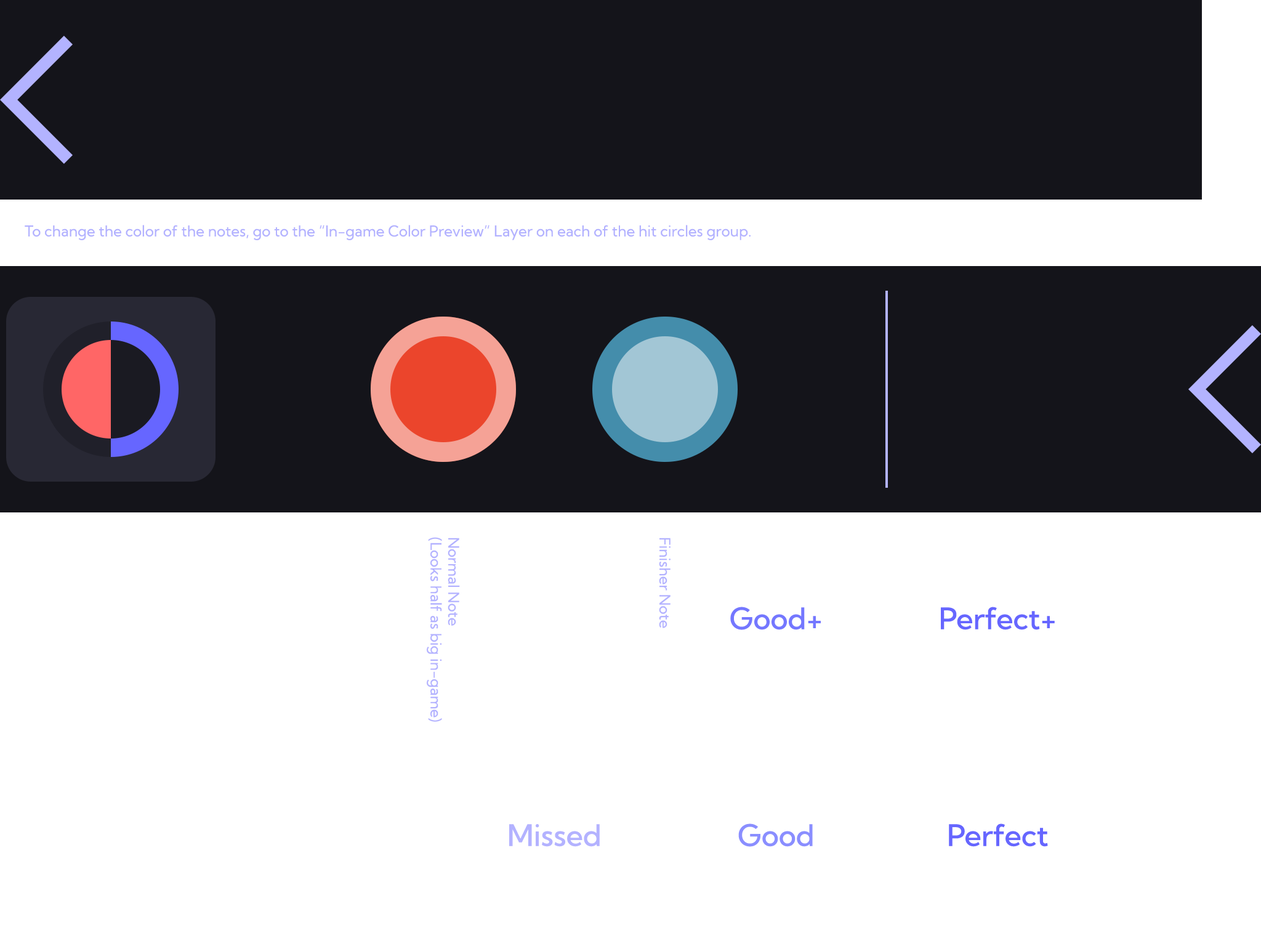
<style>
.page{position:relative;width:1261px;height:946px;background:#ffffff}
.page>*{position:absolute;margin:0}
.t1{font:14.8px "KumbhSans-Regular";color:#b3b2ff}
.t2{font:29.6px "KumbhSans-Medium";color:#7477ff}
.t3{font:29.6px "KumbhSans-Medium";color:#6666ff}
.t4{font:29.6px "KumbhSans-Medium";color:#b3b2ff}
.t5{font:29.6px "KumbhSans-Medium";color:#8a8eff}
</style>
<div class="page">
<p class="t1" style="left:25px;top:225px;width:726px;height:15px">To change the color of the notes, go to the “In-game Color Preview” Layer on each of the hit circles group.</p>
<p class="t1" style="left:427px;top:537px;width:33px;height:185px;rotate:90deg">Normal Note<br>(Looks half as big in-game)</p>
<p class="t1" style="left:659px;top:537px;width:11px;height:91px;rotate:90deg">Finisher Note</p>
<p class="t2" style="left:730px;top:606px;width:91px;height:24px">Good+</p>
<p class="t3" style="left:941px;top:606px;width:114px;height:24px">Perfect+</p>
<p class="t4" style="left:509px;top:824px;width:91px;height:23px">Missed</p>
<p class="t5" style="left:738px;top:823px;width:75px;height:24px">Good</p>
<p class="t3" style="left:949px;top:823px;width:99px;height:24px">Perfect</p>
</div>
